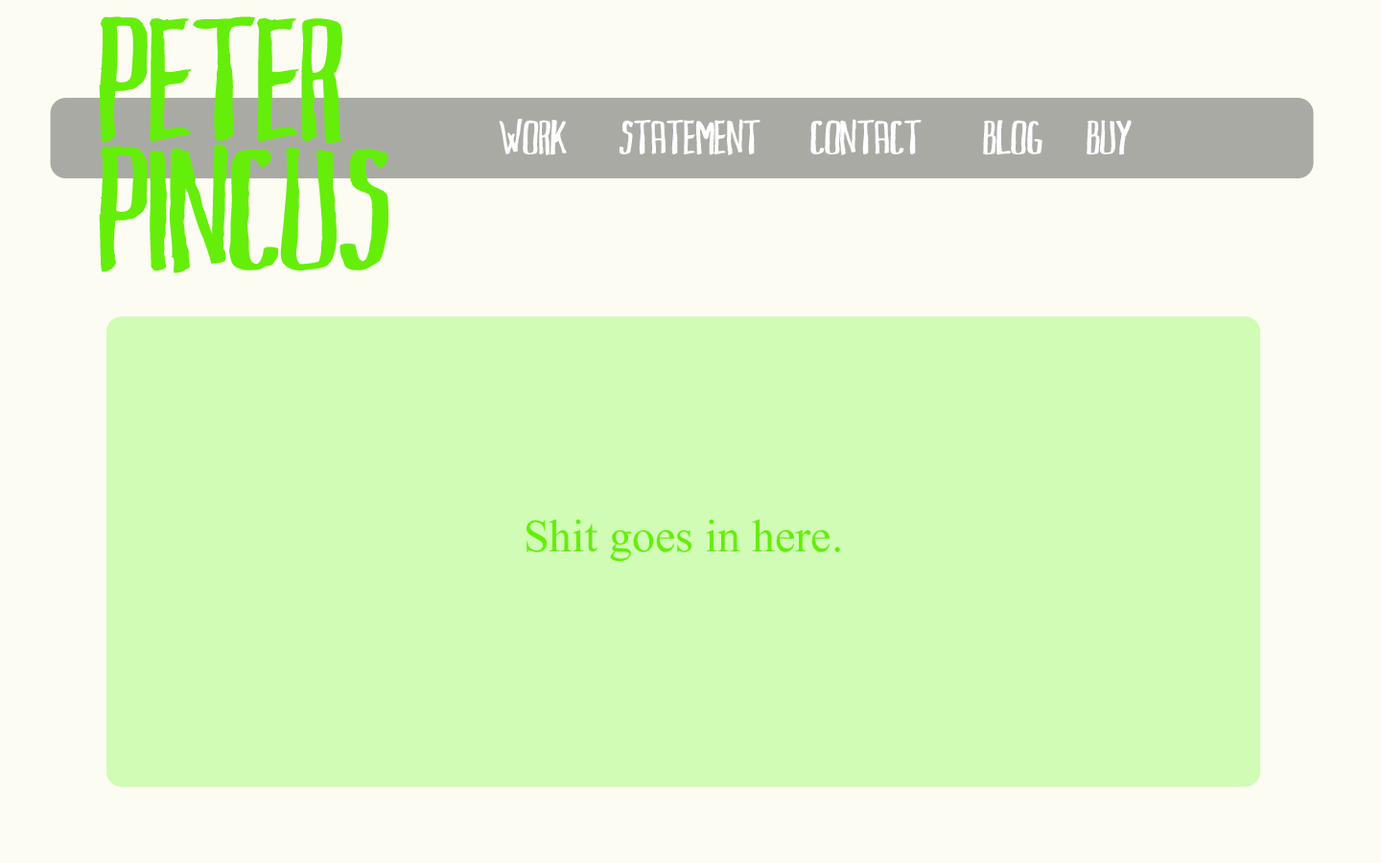
<style>
.page{position:relative;width:1381px;height:863px;background:#d0fcb6}
.page>*{position:absolute;margin:0}
.t1{font:165.9px/129.5px "MarkusInk";color:#65ee09}
.t2{font:46px "MarkusInk";color:#fdfefd}
.t3{font:46px "MongolianBaiti";color:#65ee09}
</style>
<div class="page">
<p class="t1" style="left:99px;top:16px;width:290px;height:257px">Peter<br>Pincus</p>
<p class="t2" style="left:499px;top:118px;width:633px;height:37px">Work    Statement  contact  blog  buy</p>
<p class="t3" style="left:527px;top:519px;width:313px;height:43px">Shit goes in here.</p>
</div>
